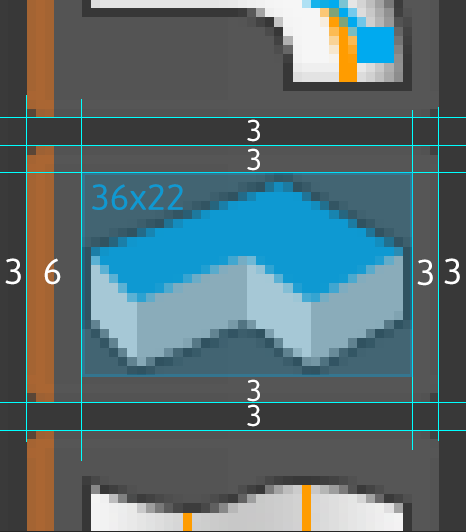
<style>
.page{position:relative;width:466px;height:532px;background:#383838}
.page>*{position:absolute;margin:0}
.t1{font:30px "Asap-Regular";color:#ffffff}
.t2{font:36px "Asap-Regular";color:#0e99d2}
.t3{font:36px "Asap-Regular";color:#ffffff}
</style>
<div class="page">
<p class="t1" style="left:247px;top:119px;width:13px;height:23px">3</p>
<p class="t1" style="left:247px;top:148px;width:13px;height:23px">3</p>
<p class="t2" style="left:92px;top:184px;width:91px;height:26px">36x22</p>
<p class="t3" style="left:5px;top:258px;width:16px;height:27px">3</p>
<p class="t3" style="left:44px;top:258px;width:17px;height:27px">6</p>
<p class="t3" style="left:417px;top:259px;width:16px;height:27px">3</p>
<p class="t3" style="left:444px;top:258px;width:16px;height:27px">3</p>
<p class="t1" style="left:247px;top:379px;width:13px;height:23px">3</p>
<p class="t1" style="left:247px;top:404px;width:13px;height:23px">3</p>
</div>
